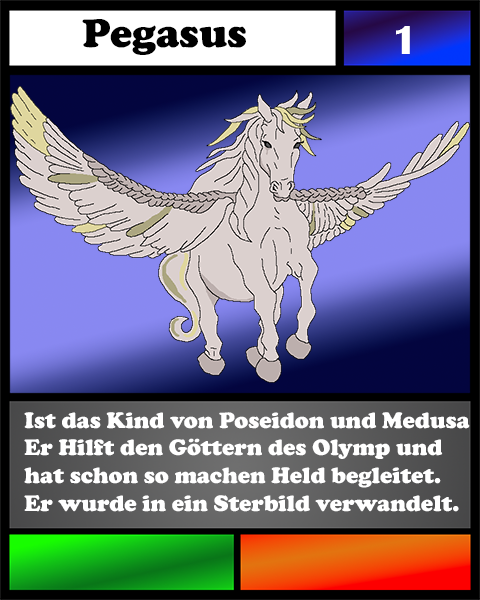
<style>
.page{position:relative;width:480px;height:600px}
.page>*{position:absolute;margin:0}
.t1{font:41.7px "CooperBlack";color:#000000}
.t2{font:41.7px "BritannicBold";color:#ffffff}
.t3{font:23.1px "CooperBlack";color:#ffffff}
</style>
<div class="page">
<p class="t1" style="left:82px;top:19px;width:164px;height:36px">Pegasus</p>
<p class="t2" style="left:396px;top:26px;width:14px;height:28px">1</p>
<p class="t3" style="left:24px;top:412px;width:446px;height:100px">Ist das Kind von Poseidon und Medusa<br>Er Hilft den Göttern des Olymp und<br>hat schon so machen Held begleitet.<br>Er wurde in ein Sterbild verwandelt.</p>
</div>
